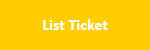
<style>
.page{position:relative;width:150px;height:50px;background:#ffcc00}
.page>*{position:absolute;margin:0}
.t1{font:16px "Calibri-Bold";color:#ffffff}
</style>
<div class="page">
<p class="t1" style="left:43px;top:19px;width:65px;height:11px">List Ticket</p>
</div>
